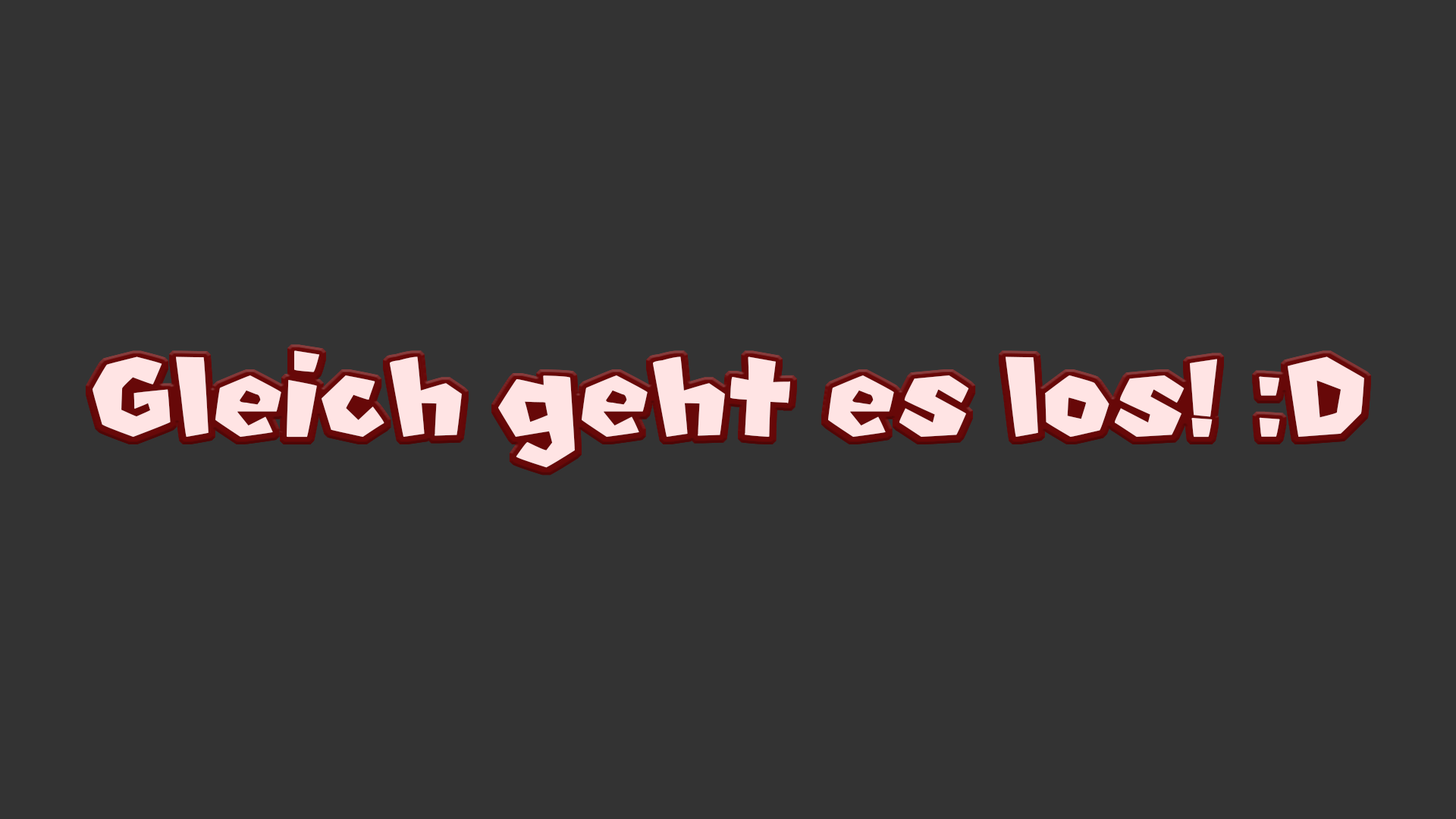
<style>
.page{position:relative;width:1456px;height:819px;background:#333333}
.page>*{position:absolute;margin:0}
.t1{font:125.8px "NewSuperMarioFontU";color:#ffe4e4}
</style>
<div class="page">
<p class="t1" style="left:93px;top:350px;width:1271px;height:118px">Gleich geht es los! :D</p>
</div>
